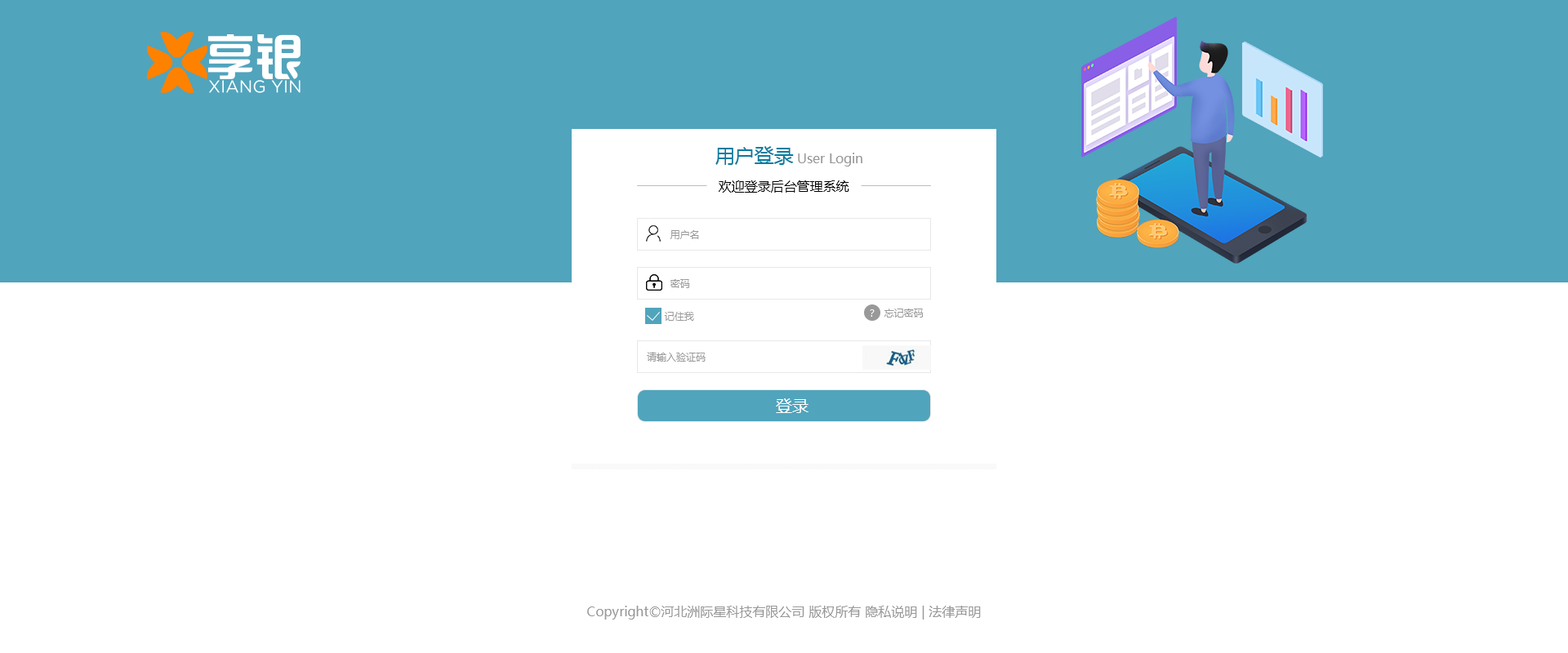
<style>
.page{position:relative;width:1568px;height:653px;background:#ffffff}
.page>*{position:absolute;margin:0}
.t1{font:19.6px "MicrosoftYaHei";color:#057d9f}
.t2{font:13.1px "MicrosoftYaHei";color:#999999}
.t3{font:13.1px "MicrosoftYaHei";color:#000000}
.t4{font:9.8px "MicrosoftYaHei";color:#999999}
.t5{font:9.8px "MicrosoftYaHei";color:#ffffff}
.t6{font:16.3px "MicrosoftYaHei";color:#ffffff}
</style>
<div class="page">
<p class="t1" style="left:715px;top:146px;width:79px;height:19px">用户登录</p>
<p class="t2" style="left:798px;top:153px;width:64px;height:14px">User Login</p>
<p class="t3" style="left:719px;top:180px;width:130px;height:13px">欢迎登录后台管理系统</p>
<p class="t4" style="left:670px;top:230px;width:29px;height:9px">用户名</p>
<p class="t4" style="left:670px;top:279px;width:20px;height:9px">密码</p>
<p class="t4" style="left:664px;top:312px;width:30px;height:9px">记住我</p>
<p class="t5" style="left:870px;top:310px;width:5px;height:7px">？</p>
<p class="t4" style="left:884px;top:309px;width:40px;height:9px">忘记密码</p>
<p class="t4" style="left:647px;top:352px;width:59px;height:10px">请输入验证码</p>
<p class="t6" style="left:776px;top:399px;width:32px;height:14px">登录</p>
<p class="t2" style="left:587px;top:606px;width:394px;height:14px">Copyright©河北洲际星科技有限公司 版权所有 隐私说明 | 法律声明</p>
</div>
